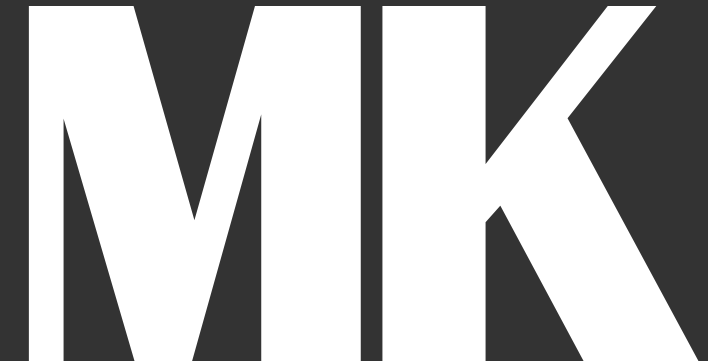
<style>
.page{position:relative;width:708px;height:361px;background:#ffffff}
.page>*{position:absolute;margin:0}
.t1{font:533.3px "BritannicBold";letter-spacing:-0.075em;color:#ffffff}
</style>
<div class="page">
<p class="t1" style="left:28px;top:6px;width:671px;height:355px">MK</p>
</div>
